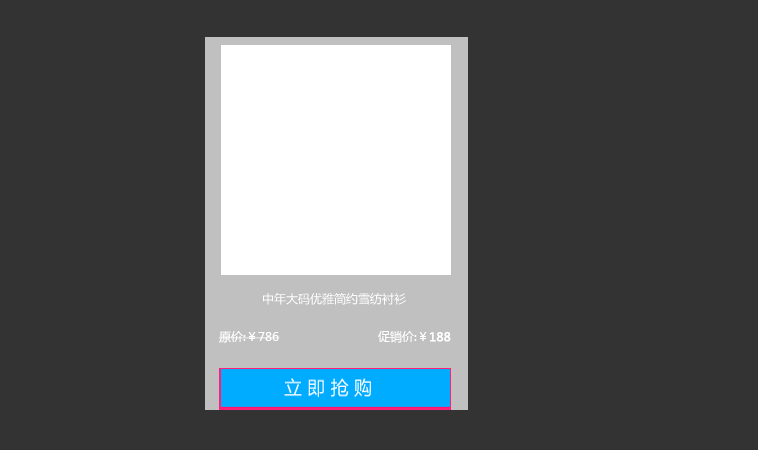
<style>
.page{position:relative;width:758px;height:450px;background:#333333}
.page>*{position:absolute;margin:0}
.t1{font:12px "MicrosoftYaHei";color:#ffffff}
.t2{font:12px "MicrosoftYaHei";color:#ffffff;font-weight:bold}
</style>
<div class="page">
<p class="t1" style="left:263px;top:292px;width:143px;height:13px">中年大码优雅简约雪纺衬衫</p>
<p class="t1" style="left:219px;top:331px;width:61px;height:12px">原价:￥786</p>
<p class="t1" style="left:378px;top:330px;width:73px;height:13px">促销价:￥<span class="t2">188</span></p>
</div>
